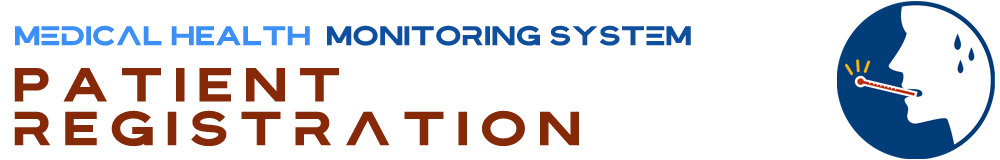
<style>
.page{position:relative;width:1000px;height:160px;background:#ffffff}
.page>*{position:absolute;margin:0}
.t1{font:23.8px "Bristone";color:#3c8ff6;scale:1.05 1}
.t2{font:23.8px "Bristone";color:#0f4f9d;scale:1.05 1}
.t3{font:42.2px/43.8px "Bristone";letter-spacing:0.24em;color:#862908;scale:1.05 1}
</style>
<div class="page">
<p class="t1" style="left:15px;top:25px;width:295px;height:21px">medical HEALTH</p>
<p class="t2" style="left:327px;top:25px;width:364px;height:21px">monitoring system</p>
<p class="t3" style="left:14px;top:68px;width:565px;height:79px">PATIENT<br>rEgistration</p>
</div>
